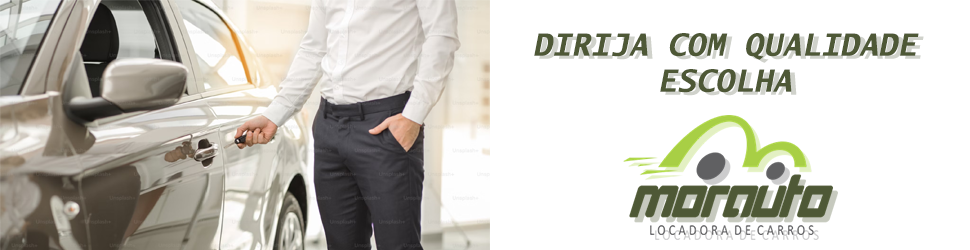
<style>
.page{position:relative;width:970px;height:250px;background:#ffffff}
.page>*{position:absolute;margin:0}
.t1{font:30px/36px "LucidaSans-TypewriterBoldOblique";letter-spacing:0.01em;color:#4e5836;font-weight:bold}
</style>
<div class="page">
<p class="t1" style="left:534px;top:33px;width:385px;height:60px;text-align:center">DIRIJA COM QUALIDADE<br>ESCOLHA</p>
</div>
